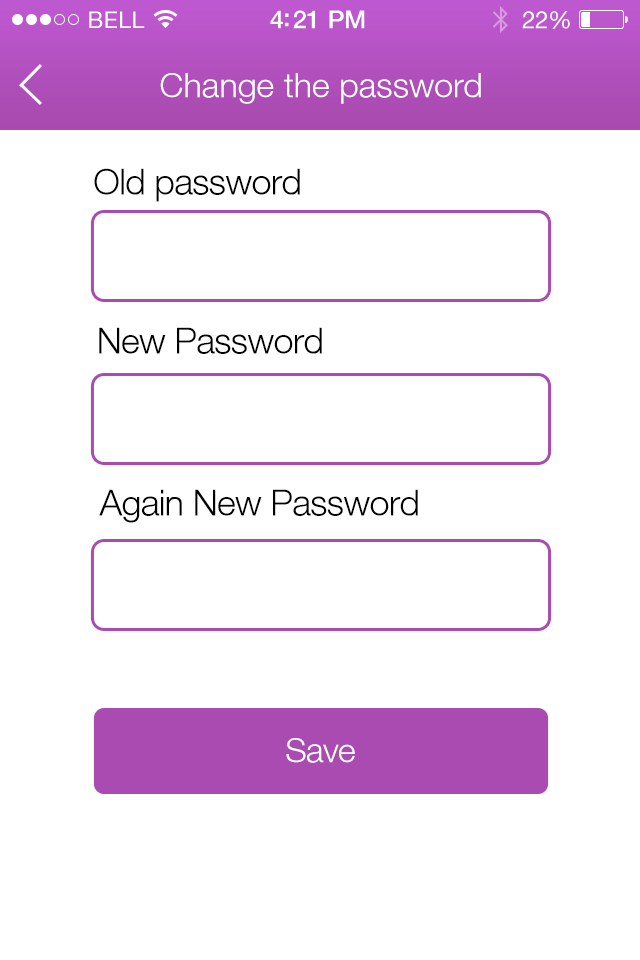
<style>
.page{position:relative;width:640px;height:960px;background:#ffffff}
.page>*{position:absolute;margin:0}
.t1{font:34px "HelveticaNeueLT-Light";color:#ffffff}
.t2{font:36px "HelveticaNeueLT-Light";letter-spacing:-0.02em;color:#000000}
.t3{font:34px "HelveticaNeueLT-Light";letter-spacing:-0.02em;color:#ffffff}
</style>
<div class="page">
<p class="t1" style="left:160px;top:73px;width:321px;height:31px">Change the password</p>
<p class="t2" style="left:94px;top:168px;width:206px;height:34px">Old password</p>
<p class="t2" style="left:99px;top:327px;width:223px;height:27px">New Password</p>
<p class="t2" style="left:99px;top:489px;width:319px;height:34px">Again New Password</p>
<p class="t3" style="left:286px;top:738px;width:69px;height:25px">Save</p>
</div>
